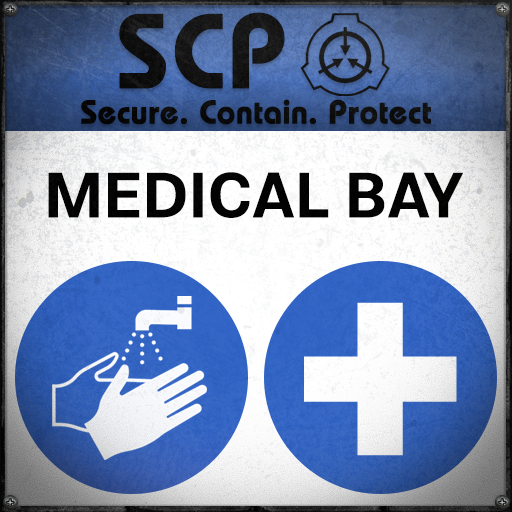
<style>
.page{position:relative;width:512px;height:512px}
.page>*{position:absolute;margin:0}
.t1{font:105.8px "BauhausLT-Demi";color:#000000;font-weight:bold}
.t2{font:33px "BauhausLT-Demi";color:#000000;font-weight:bold}
.t3{font:63.9px "Molde-Semibold";color:#000000;text-transform:uppercase}
</style>
<div class="page">
<p class="t1" style="left:119px;top:12px;width:166px;height:77px">SCP</p>
<p class="t2" style="left:81px;top:99px;width:350px;height:26px">Secure. Contain. Protect</p>
<p class="t3" style="left:48px;top:172px;width:416px;height:46px">Medical Bay</p>
</div>
